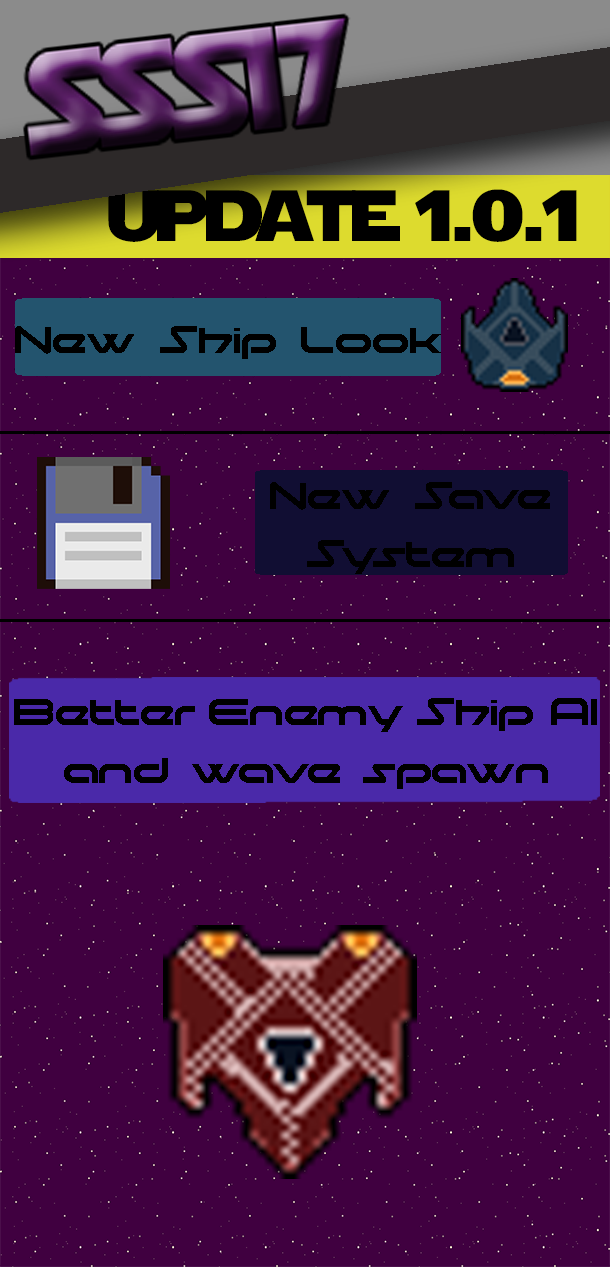
<style>
.page{position:relative;width:610px;height:1267px;background:#400040}
.page>*{position:absolute;margin:0}
.t1{font:72px "StarJedi";color:#000000}
.t2{font:48px "moonhouse";color:#000000}
</style>
<div class="page">
<p class="t1" style="left:108px;top:189px;width:469px;height:53px">update 1.0.1</p>
<p class="t2" style="left:15px;top:326px;width:426px;height:33px">New Ship Look</p>
<p class="t2" style="left:270px;top:482px;width:280px;height:92px;text-align:center">New Save<br>System</p>
<p class="t2" style="left:14px;top:698px;width:583px;height:91px;text-align:center">Better Enemy Ship AI<br>and wave spawn</p>
</div>
